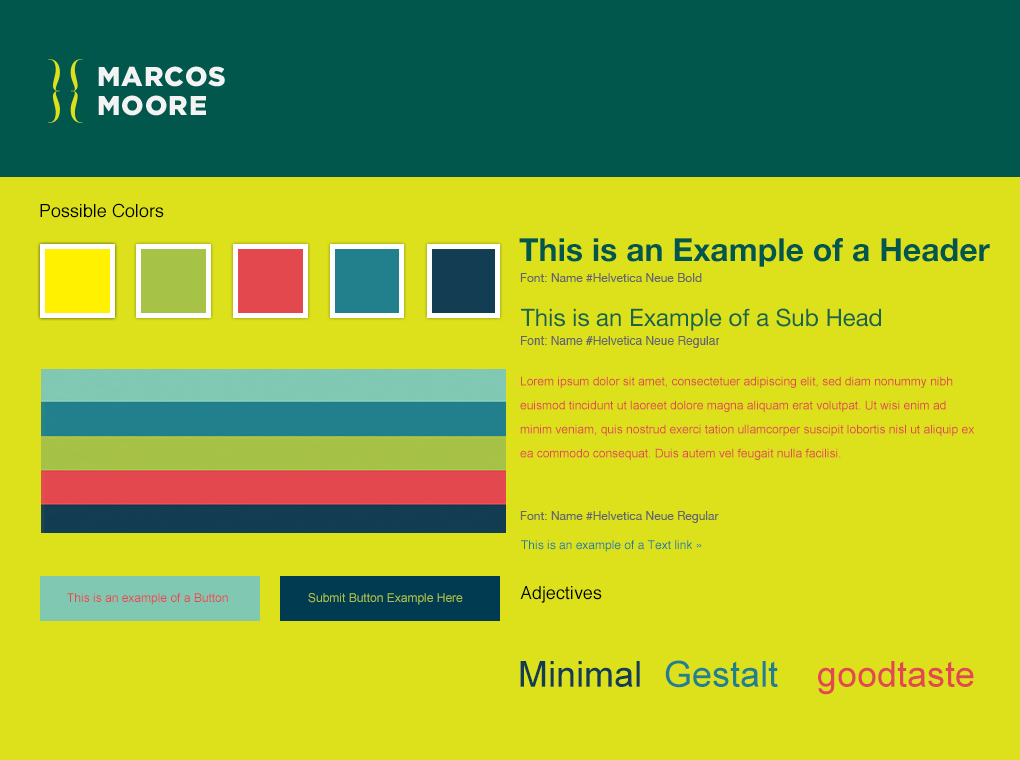
<style>
.page{position:relative;width:1020px;height:760px;background:#dce11c}
.page>*{position:absolute;margin:0}
.t1{font:18px "Helvetica";color:#000000}
.t2{font:32px "HelveticaNeue-Bold";color:#01574c}
.t3{font:12px "HelveticaNeue";color:#666666}
.t4{font:24px "HelveticaNeue";color:#1a6449}
.t5{font:12px "Helvetica";color:#666666}
.t6{font:12px/24px "ArialMT";color:#e2484e}
.t7{font:12px "Helvetica";color:#21808c}
.t8{font:12px "ArialMT";color:#e2484e}
.t9{font:12px "ArialMT";color:#a6c147}
.t10{font:36px "ArialMT";color:#123c52}
.t11{font:36px "ArialMT";color:#22808c}
.t12{font:36px "ArialMT";color:#e2484e}
</style>
<div class="page">
<p class="t1" style="left:40px;top:203px;width:124px;height:15px">Possible Colors</p>
<p class="t2" style="left:519px;top:238px;width:471px;height:29px">This is an Example of a Header</p>
<p class="t3" style="left:520px;top:273px;width:182px;height:9px">Font: Name #Helvetica Neue Bold</p>
<p class="t4" style="left:521px;top:308px;width:360px;height:23px">This is an Example of a Sub Head</p>
<p class="t5" style="left:521px;top:336px;width:199px;height:12px">Font: Name #Helvetica Neue Regular</p>
<p class="t6" style="left:520px;top:376px;width:455px;height:84px">Lorem ipsum dolor sit amet, consectetuer adipiscing elit, sed diam nonummy nibh euismod tincidunt ut laoreet dolore magna aliquam erat volutpat. Ut wisi enim ad minim veniam, quis nostrud exerci tation ullamcorper suscipit lobortis nisl ut aliquip ex ea commodo consequat. Duis autem vel feugait nulla facilisi.</p>
<p class="t3" style="left:520px;top:511px;width:199px;height:12px">Font: Name #Helvetica Neue Regular</p>
<p class="t7" style="left:521px;top:540px;width:181px;height:12px">This is an example of a Text link »</p>
<p class="t8" style="left:67px;top:593px;width:161px;height:12px">This is an example of a Button</p>
<p class="t9" style="left:308px;top:593px;width:155px;height:12px">Submit Button Example Here</p>
<p class="t1" style="left:520px;top:586px;width:82px;height:17px">Adjectives</p>
<p class="t10" style="left:520px;top:661px;width:120px;height:26px">Minimal</p>
<p class="t11" style="left:665px;top:660px;width:113px;height:28px">Gestalt</p>
<p class="t12" style="left:818px;top:661px;width:156px;height:34px">goodtaste</p>
</div>
